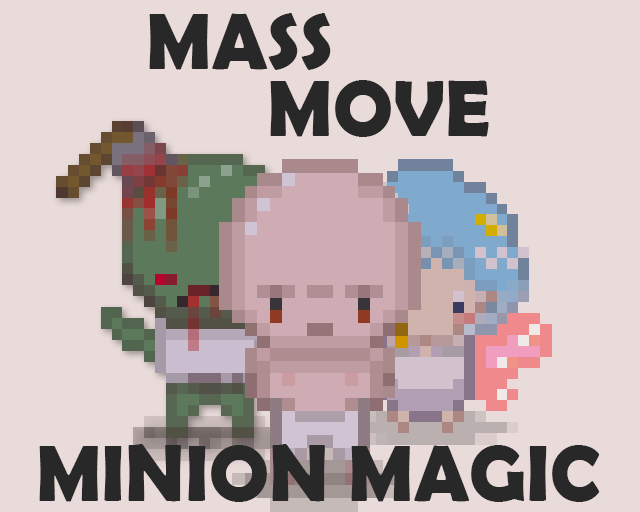
<style>
.page{position:relative;width:640px;height:512px;background:#e9dbd9}
.page>*{position:absolute;margin:0}
.t1{font:80px "BerlinSansFBDemi-Bold";color:#282828}
</style>
<div class="page">
<p class="t1" style="left:149px;top:13px;width:182px;height:57px">MASS</p>
<p class="t1" style="left:270px;top:80px;width:219px;height:57px">MOVE</p>
<p class="t1" style="left:39px;top:444px;width:561px;height:58px">MINION MAGIC</p>
</div>
